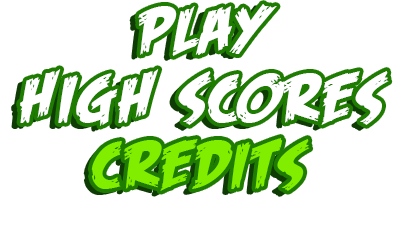
<style>
.page{position:relative;width:400px;height:242px;background:#ffffff}
.page>*{position:absolute;margin:0}
.t1{font:67.5px "FeastofFleshBBItalic";letter-spacing:0.08em;color:#ffffff}
.t2{font:69.2px "FeastofFleshBBItalic";letter-spacing:0.08em;color:#ffffff}
.t3{font:67.2px "FeastofFleshBBItalic";letter-spacing:0.08em}
.t4{font:67.5px "FeastofFleshBBItalic";letter-spacing:0.08em;color:#81ee00}
</style>
<div class="page">
<p class="t1" style="left:138px;top:4px;width:139px;height:52px">play</p>
<p class="t2" style="left:20px;top:69px;width:369px;height:57px">high scores</p>
<p class="t3" style="left:85px;top:142px;width:216px;height:53px">credits</p>
<p class="t4" style="left:91px;top:138px;width:219px;height:53px">credits</p>
</div>
